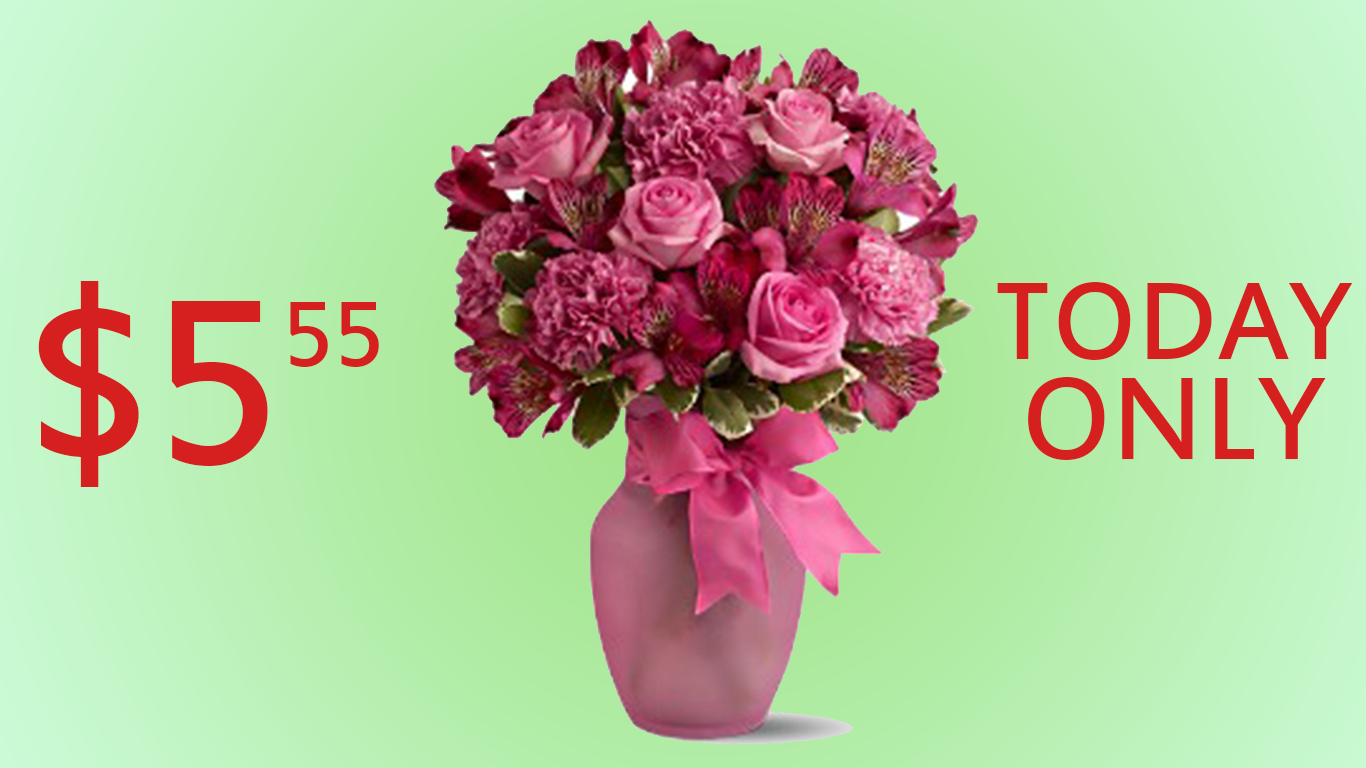
<style>
.page{position:relative;width:1366px;height:768px}
.page>*{position:absolute;margin:0}
.t1{font:258px "EstrangeloEdessa";color:#d62020;text-transform:uppercase}
.t2{font:101px "EstrangeloEdessa";color:#d62020;text-transform:uppercase}
.t3{font:120px/155px "EstrangeloEdessa";color:#d62020;text-transform:uppercase}
.t4{font:128px/187px "EstrangeloEdessa";color:#d62020;text-transform:uppercase}
</style>
<div class="page">
<p class="t1" style="left:38px;top:280px;width:341px;height:207px">$5<span class="t2">55</span></p>
<p class="t3" style="left:997px;top:282px;width:356px;height:178px;text-align:center">today<br><span class="t4">only</span></p>
</div>
